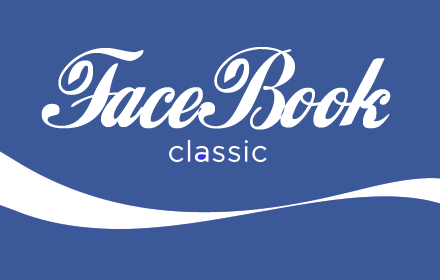
<style>
.page{position:relative;width:440px;height:280px;background:#3b5998}
.page>*{position:absolute;margin:0}
.t1{font:104px "LokiCola";letter-spacing:-0.025em;color:#ffffff}
</style>
<div class="page">
<p class="t1" style="left:41px;top:47px;width:350px;height:83px">FaceBook</p>
</div>
